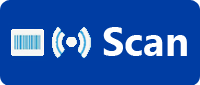
<style>
.page{position:relative;width:200px;height:85px;background:#003da3}
.page>*{position:absolute;margin:0}
.t1{font:40.6px "SegoeUI-Bold";color:#feffff}
</style>
<div class="page">
<p class="t1" style="left:103px;top:27px;width:84px;height:29px">Scan</p>
</div>
